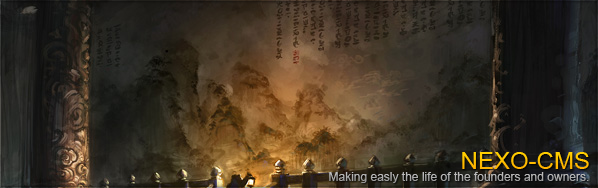
<style>
.page{position:relative;width:598px;height:188px}
.page>*{position:absolute;margin:0}
.t1{font:24px "ArialMT";color:#ffc100}
.t2{font:12px "ArialMT";color:#adadad}
</style>
<div class="page">
<p class="t1" style="left:462px;top:152px;width:127px;height:17px">NEXO-CMS</p>
<p class="t1" style="left:462px;top:152px;width:127px;height:17px">NEXO-CMS</p>
<p class="t2" style="left:329px;top:172px;width:260px;height:11px">Making easly the life of the founders and owners.</p>
<p class="t2" style="left:329px;top:172px;width:260px;height:11px">Making easly the life of the founders and owners.</p>
</div>
